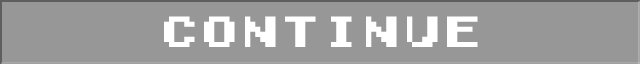
<style>
.page{position:relative;width:640px;height:64px;background:#979797}
.page>*{position:absolute;margin:0}
.t1{font:40.5px "GamegirlClassic";color:#ffffff}
</style>
<div class="page">
<p class="t1" style="left:164px;top:16px;width:314px;height:31px">CONTINUE</p>
</div>
